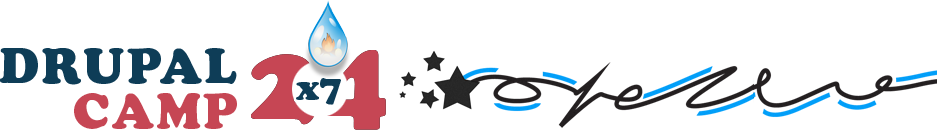
<style>
.page{position:relative;width:940px;height:137px;background:#ffffff}
.page>*{position:absolute;margin:0}
.t1{font:48px "CooperBlackStd";letter-spacing:0.05em;color:#0e3d57}
.t2{font:36px "CooperBlackStd";color:#0e3d57}
.t3{font:48px "CooperBlackStd";letter-spacing:0.05em;color:#c64654}
</style>
<div class="page">
<p class="t1" style="left:0px;top:48px;width:237px;height:37px">DRUPAL</p>
<p class="t1" style="left:3px;top:50px;width:237px;height:37px">DRUPAL</p>
<p class="t2" style="left:296px;top:78px;width:45px;height:27px">x7</p>
<p class="t3" style="left:74px;top:93px;width:163px;height:36px">CAMP</p>
<p class="t3" style="left:75px;top:95px;width:163px;height:36px">CAMP</p>
</div>
